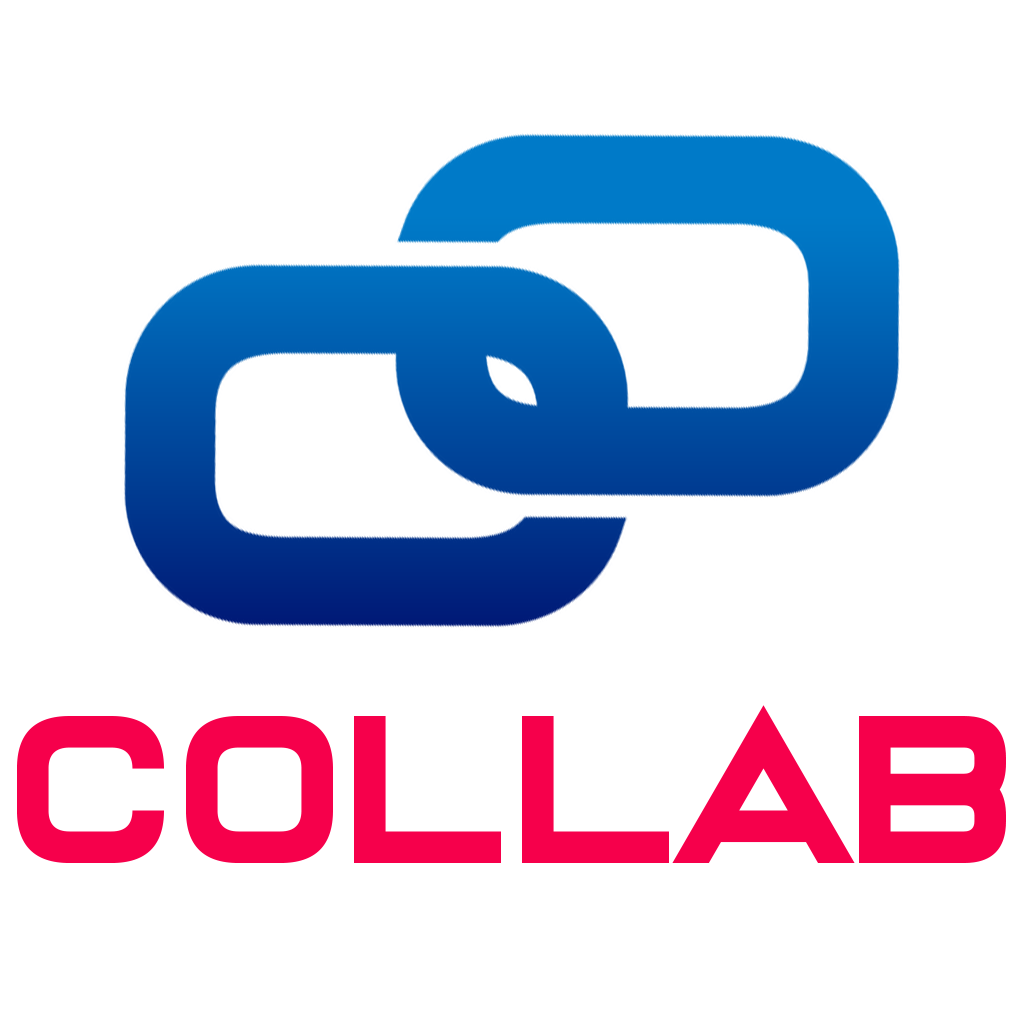
<style>
.page{position:relative;width:1024px;height:1024px;background:#ffffff}
.page>*{position:absolute;margin:0}
.t1{font:215.4px "CasanovaScotia";color:#f6004b;text-transform:uppercase}
</style>
<div class="page">
<p class="t1" style="left:17px;top:705px;width:989px;height:158px">collab</p>
</div>
